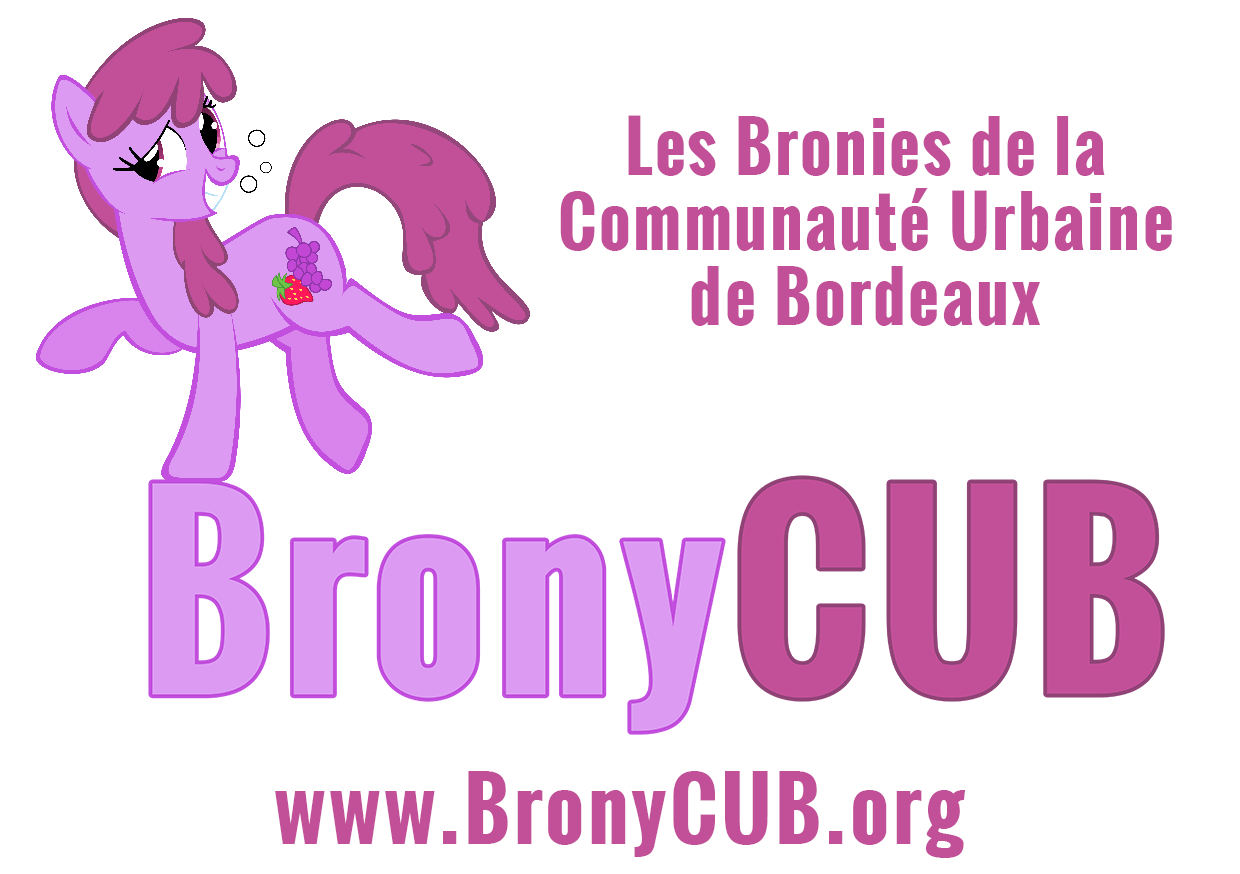
<style>
.page{position:relative;width:1240px;height:874px;background:#ffffff}
.page>*{position:absolute;margin:0}
.t1{font:66.7px/75px "Oswald-Bold";letter-spacing:0.04em;color:#c25098}
.t2{font:83.3px "Oswald-Bold";letter-spacing:0.04em;color:#c25098}
</style>
<div class="page">
<p class="t1" style="left:560px;top:115px;width:612px;height:211px;text-align:center">Les Bronies de la <br>Communauté Urbaine de Bordeaux</p>
<p class="t2" style="left:275px;top:771px;width:691px;height:87px">www.BronyCUB.org</p>
</div>
